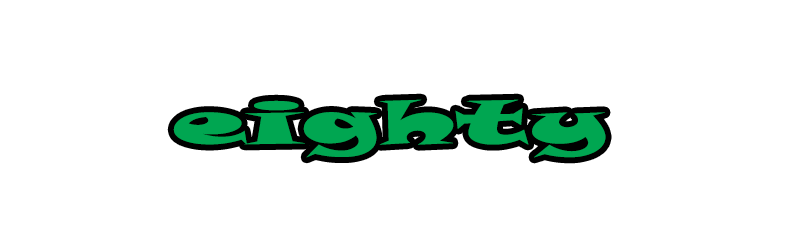
<style>
.page{position:relative;width:812px;height:249px;background:#ffffff}
.page>*{position:absolute;margin:0}
.t1{font:60px "SnapITC-Regular";color:#00a651;scale:2 1}
</style>
<div class="page">
<p class="t1" style="left:173px;top:99px;width:433px;height:59px">eighty</p>
</div>
